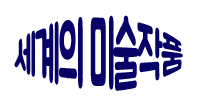
<style>
.page{position:relative;width:200px;height:100px;background:#ffffff}
.page>*{position:absolute;margin:0}
.t1{font:30px/48px "BMJUA";letter-spacing:-0.05em;color:#070266}
</style>
<div class="page">
<p class="t1" style="left:14px;top:15px;width:169px;height:76px">세계의 미술작품</p>
</div>
